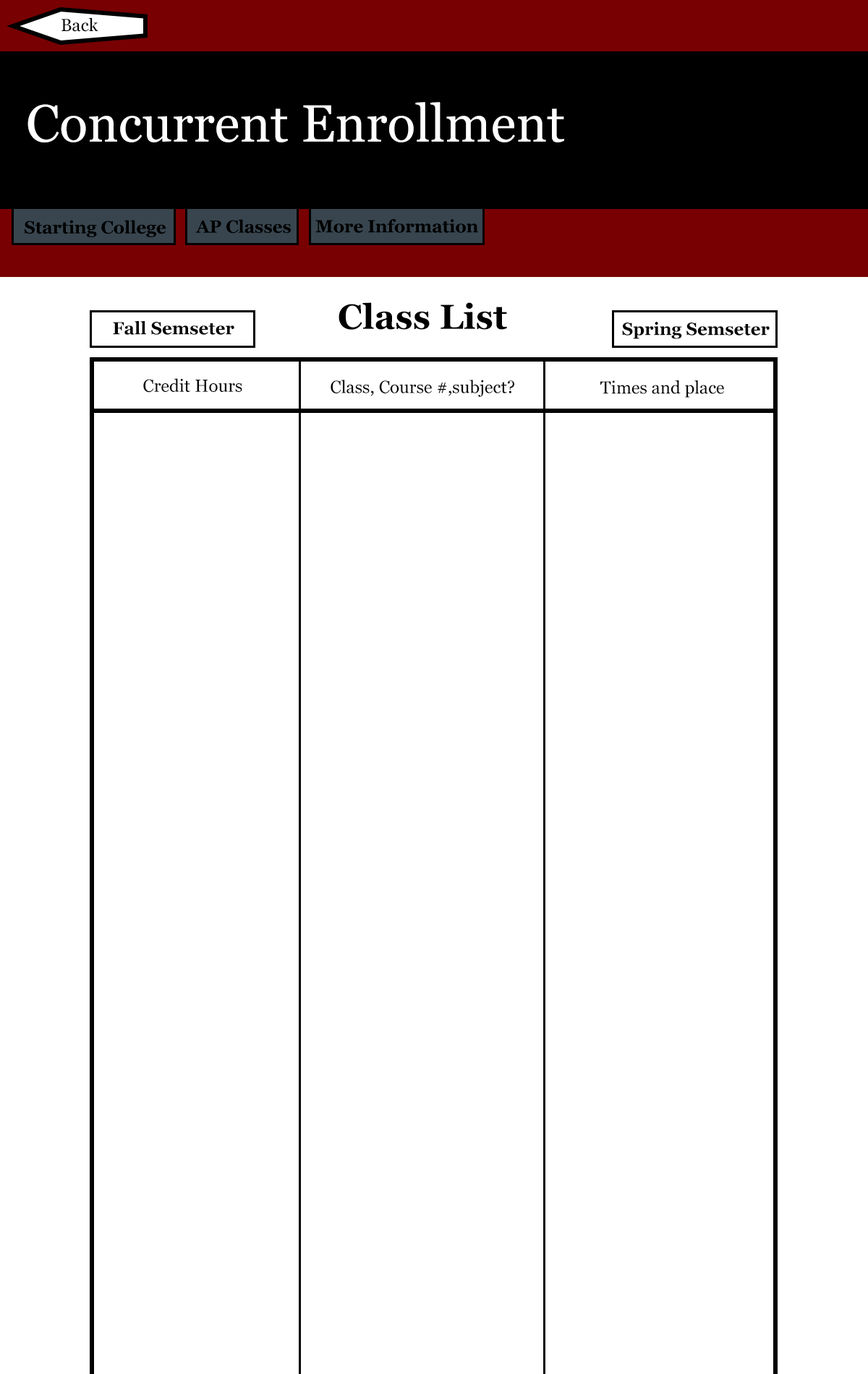
<style>
.page{position:relative;width:868px;height:1374px;background:#ffffff}
.page>*{position:absolute;margin:0}
.t1{font:17.4px "Georgia";color:#050505}
.t2{font:52.1px "Georgia";color:#ffffff}
.t3{font:17.4px "Georgia-Bold";color:#000000}
.t4{font:34.7px "Georgia-Bold";color:#000000}
.t5{font:17.4px "Georgia-Bold";color:#050505}
</style>
<div class="page">
<p class="t1" style="left:61px;top:17px;width:37px;height:15px">Back</p>
<p class="t2" style="left:27px;top:102px;width:537px;height:40px">Concurrent Enrollment</p>
<p class="t3" style="left:25px;top:220px;width:141px;height:17px">Starting College</p>
<p class="t3" style="left:195px;top:219px;width:96px;height:15px">AP Classes</p>
<p class="t4" style="left:338px;top:302px;width:169px;height:28px">Class List</p>
<p class="t5" style="left:113px;top:321px;width:121px;height:14px">Fall Semseter</p>
<p class="t5" style="left:622px;top:322px;width:147px;height:17px">Spring Semseter</p>
<p class="t1" style="left:143px;top:378px;width:99px;height:15px">Credit Hours</p>
<p class="t1" style="left:330px;top:380px;width:184px;height:17px">Class, Course #,subject?</p>
<p class="t1" style="left:600px;top:380px;width:124px;height:18px">Times and place</p>
</div>
